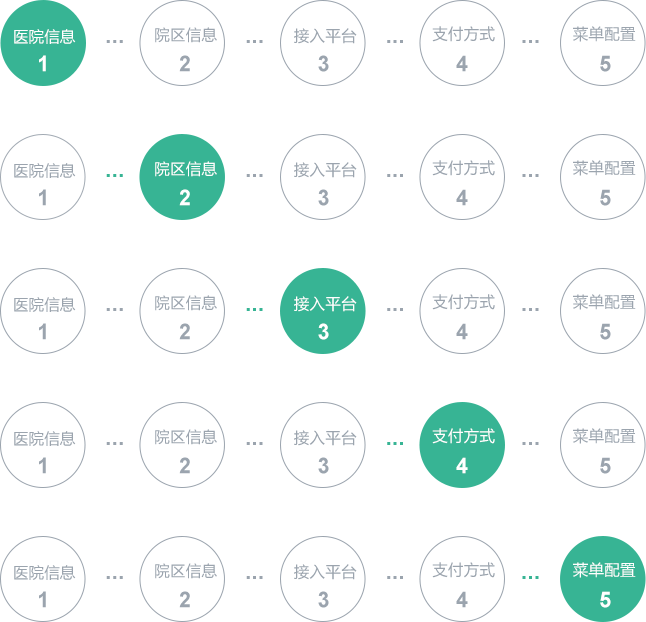
<style>
.page{position:relative;width:646px;height:622px;background:#ffffff}
.page>*{position:absolute;margin:0}
.t1{font:15.6px "MicrosoftYaHei";letter-spacing:0.015em;color:#ffffff}
.t2{font:15.6px "MicrosoftYaHei";letter-spacing:0.015em;color:#9ba4ae}
.t3{font:22px "Arial-BoldMT";letter-spacing:0.015em;color:#9ba4ae}
.t4{font:22px "Arial-BoldMT";letter-spacing:0.015em;color:#ffffff}
.t5{font:22px "Arial-BoldMT";letter-spacing:0.015em;color:#37b494}
</style>
<div class="page">
<p class="t1" style="left:14px;top:29px;width:62px;height:15px">医院信息</p>
<p class="t2" style="left:155px;top:27px;width:62px;height:16px">院区信息</p>
<p class="t2" style="left:294px;top:28px;width:63px;height:16px">接入平台</p>
<p class="t2" style="left:432px;top:26px;width:63px;height:16px">支付方式</p>
<p class="t2" style="left:573px;top:26px;width:63px;height:16px">菜单配置</p>
<p class="t3" style="left:106px;top:40px;width:17px;height:3px">...</p>
<p class="t3" style="left:246px;top:40px;width:17px;height:3px">...</p>
<p class="t3" style="left:387px;top:40px;width:16px;height:3px">...</p>
<p class="t3" style="left:522px;top:40px;width:17px;height:3px">...</p>
<p class="t4" style="left:39px;top:55px;width:7px;height:17px">1</p>
<p class="t3" style="left:179px;top:55px;width:11px;height:17px">2</p>
<p class="t3" style="left:318px;top:55px;width:11px;height:17px">3</p>
<p class="t3" style="left:456px;top:55px;width:12px;height:17px">4</p>
<p class="t3" style="left:600px;top:55px;width:11px;height:17px">5</p>
<p class="t1" style="left:155px;top:161px;width:62px;height:16px">院区信息</p>
<p class="t2" style="left:432px;top:160px;width:63px;height:16px">支付方式</p>
<p class="t2" style="left:573px;top:160px;width:63px;height:16px">菜单配置</p>
<p class="t2" style="left:14px;top:163px;width:62px;height:15px">医院信息</p>
<p class="t5" style="left:106px;top:174px;width:17px;height:3px">...</p>
<p class="t3" style="left:246px;top:174px;width:17px;height:3px">...</p>
<p class="t2" style="left:294px;top:162px;width:63px;height:16px">接入平台</p>
<p class="t3" style="left:387px;top:174px;width:16px;height:3px">...</p>
<p class="t3" style="left:522px;top:174px;width:17px;height:3px">...</p>
<p class="t3" style="left:39px;top:189px;width:7px;height:17px">1</p>
<p class="t4" style="left:179px;top:189px;width:11px;height:17px">2</p>
<p class="t3" style="left:318px;top:189px;width:11px;height:17px">3</p>
<p class="t3" style="left:456px;top:189px;width:12px;height:17px">4</p>
<p class="t3" style="left:600px;top:189px;width:11px;height:17px">5</p>
<p class="t2" style="left:432px;top:294px;width:63px;height:16px">支付方式</p>
<p class="t2" style="left:573px;top:294px;width:63px;height:16px">菜单配置</p>
<p class="t2" style="left:14px;top:297px;width:62px;height:15px">医院信息</p>
<p class="t2" style="left:155px;top:295px;width:62px;height:16px">院区信息</p>
<p class="t1" style="left:294px;top:296px;width:63px;height:16px">接入平台</p>
<p class="t3" style="left:106px;top:308px;width:17px;height:3px">...</p>
<p class="t5" style="left:246px;top:308px;width:17px;height:3px">...</p>
<p class="t3" style="left:387px;top:308px;width:16px;height:3px">...</p>
<p class="t3" style="left:522px;top:308px;width:17px;height:3px">...</p>
<p class="t3" style="left:39px;top:323px;width:7px;height:17px">1</p>
<p class="t3" style="left:179px;top:323px;width:11px;height:17px">2</p>
<p class="t4" style="left:318px;top:323px;width:11px;height:17px">3</p>
<p class="t3" style="left:456px;top:323px;width:12px;height:17px">4</p>
<p class="t3" style="left:600px;top:323px;width:11px;height:17px">5</p>
<p class="t2" style="left:14px;top:431px;width:62px;height:15px">医院信息</p>
<p class="t2" style="left:155px;top:429px;width:62px;height:16px">院区信息</p>
<p class="t2" style="left:294px;top:430px;width:63px;height:16px">接入平台</p>
<p class="t1" style="left:432px;top:428px;width:63px;height:16px">支付方式</p>
<p class="t2" style="left:573px;top:428px;width:63px;height:16px">菜单配置</p>
<p class="t3" style="left:106px;top:442px;width:17px;height:3px">...</p>
<p class="t3" style="left:246px;top:442px;width:17px;height:3px">...</p>
<p class="t5" style="left:387px;top:442px;width:16px;height:3px">...</p>
<p class="t3" style="left:522px;top:442px;width:17px;height:3px">...</p>
<p class="t3" style="left:39px;top:457px;width:7px;height:17px">1</p>
<p class="t3" style="left:179px;top:457px;width:11px;height:17px">2</p>
<p class="t3" style="left:318px;top:457px;width:11px;height:17px">3</p>
<p class="t4" style="left:456px;top:457px;width:12px;height:17px">4</p>
<p class="t3" style="left:600px;top:457px;width:11px;height:17px">5</p>
<p class="t2" style="left:14px;top:565px;width:62px;height:15px">医院信息</p>
<p class="t2" style="left:155px;top:563px;width:62px;height:16px">院区信息</p>
<p class="t2" style="left:294px;top:564px;width:63px;height:16px">接入平台</p>
<p class="t2" style="left:432px;top:562px;width:63px;height:16px">支付方式</p>
<p class="t1" style="left:573px;top:562px;width:63px;height:16px">菜单配置</p>
<p class="t3" style="left:106px;top:576px;width:17px;height:3px">...</p>
<p class="t3" style="left:246px;top:576px;width:17px;height:3px">...</p>
<p class="t3" style="left:387px;top:576px;width:16px;height:3px">...</p>
<p class="t5" style="left:522px;top:576px;width:17px;height:3px">...</p>
<p class="t3" style="left:39px;top:591px;width:7px;height:17px">1</p>
<p class="t3" style="left:179px;top:591px;width:11px;height:17px">2</p>
<p class="t3" style="left:318px;top:591px;width:11px;height:17px">3</p>
<p class="t3" style="left:456px;top:591px;width:12px;height:17px">4</p>
<p class="t4" style="left:600px;top:591px;width:11px;height:17px">5</p>
</div>
